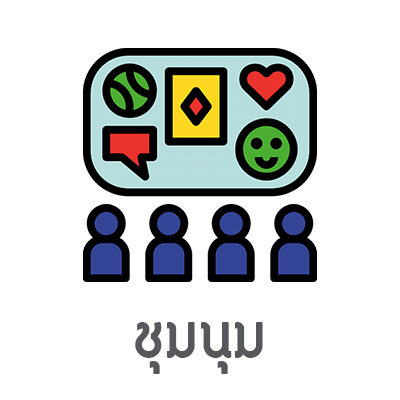
<style>
.page{position:relative;width:400px;height:400px;background:#ffffff}
.page>*{position:absolute;margin:0}
.t1{font:83.3px "Circular-Bold";color:#56585b}
</style>
<div class="page">
<p class="t1" style="left:135px;top:322px;width:128px;height:52px">ชุมนุม</p>
</div>
